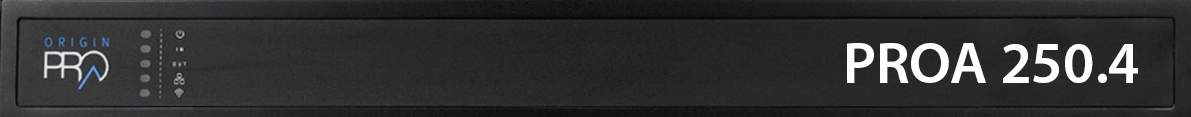
<style>
.page{position:relative;width:1191px;height:117px}
.page>*{position:absolute;margin:0}
.t1{font:59px "MyriadPro-Semibold";color:#ffffff}
</style>
<div class="page">
<p class="t1" style="left:847px;top:43px;width:291px;height:40px">PROA 250.4</p>
</div>
